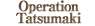
<style>
.page{position:relative;width:95px;height:26px;background:#ffffff}
.page>*{position:absolute;margin:0}
.t1{font:14px/12px "RyuminPro-ExBold";letter-spacing:-0.08em;color:#6b573e;font-weight:bold}
</style>
<div class="page">
<p class="t1" style="left:16px;top:0px;width:66px;height:24px;text-align:center">Operation<br>Tatsumaki</p>
</div>
